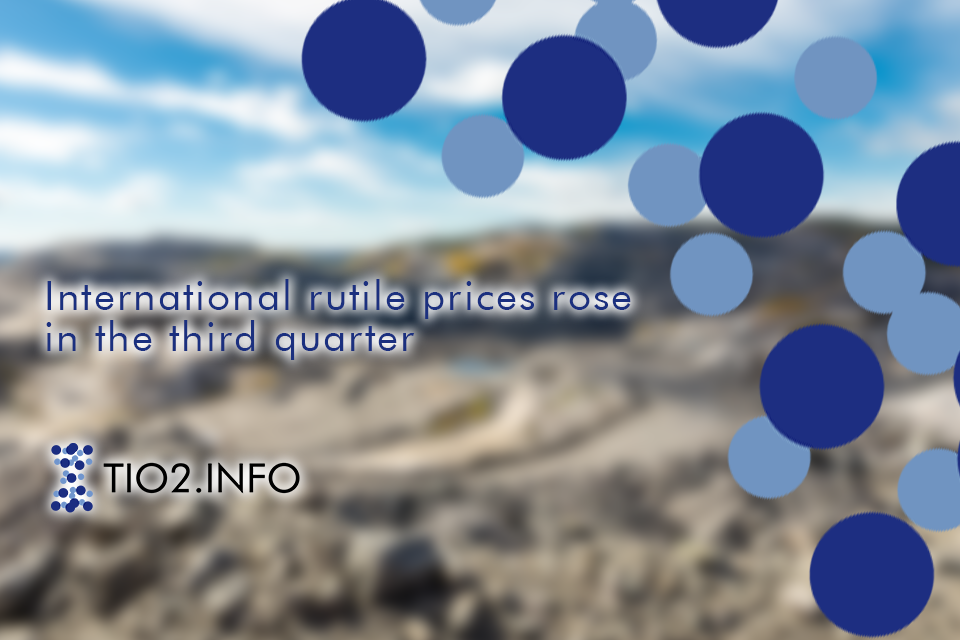
<style>
.page{position:relative;width:960px;height:640px}
.page>*{position:absolute;margin:0}
.t1{font:40.7px/40.7px "FuturaBT-Book";letter-spacing:0.05em;color:#1b307f}
</style>
<div class="page">
<p class="t1" style="left:46px;top:279px;width:585px;height:81px">International rutile prices rose <br>in the third quarter</p>
</div>
